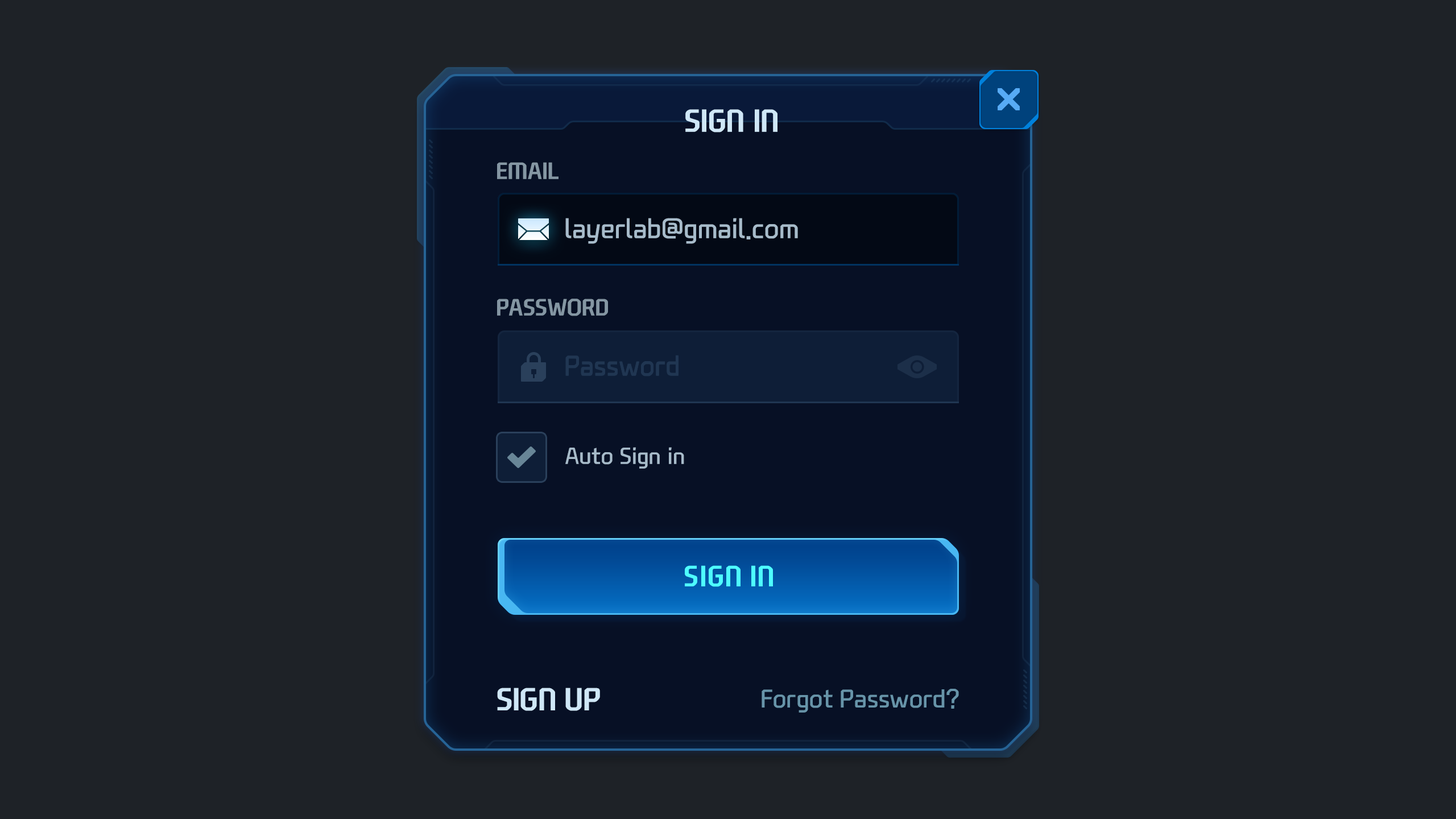
<style>
.page{position:relative;width:1456px;height:819px;background:#1e2227}
.page>*{position:absolute;margin:0}
.t1{font:30.7px "NEXONFootballGothicB";color:#cfe7f7;text-transform:uppercase}
.t2{font:22.7px "NEXONFootballGothicB";color:#8496a3;text-transform:uppercase}
.t3{font:27.3px "NEXONFootballGothicL";color:#a7bbca}
.t4{font:27.3px "NEXONFootballGothicL";color:#203652}
.t5{font:22.7px "NEXONFootballGothicL";color:#a7bbca}
.t6{font:28.4px "NEXONFootballGothicB";color:#4efefe;text-transform:uppercase}
.t7{font:25px "NEXONFootballGothicL";color:#6794a9}
</style>
<div class="page">
<p class="t1" style="left:685px;top:109px;width:92px;height:24px">Sign in</p>
<p class="t2" style="left:497px;top:162px;width:62px;height:17px">Email</p>
<p class="t3" style="left:565px;top:218px;width:233px;height:26px">layerlab@gmail.com</p>
<p class="t2" style="left:497px;top:299px;width:111px;height:17px">Password</p>
<p class="t4" style="left:565px;top:355px;width:114px;height:22px">Password</p>
<p class="t4" style="left:565px;top:355px;width:114px;height:21px">Password</p>
<p class="t5" style="left:565px;top:447px;width:119px;height:22px">Auto Sign in</p>
<p class="t6" style="left:685px;top:565px;width:88px;height:22px">Sign in</p>
<p class="t1" style="left:497px;top:688px;width:103px;height:23px">Sign up</p>
<p class="t7" style="left:762px;top:689px;width:197px;height:24px">Forgot Password?</p>
</div>
